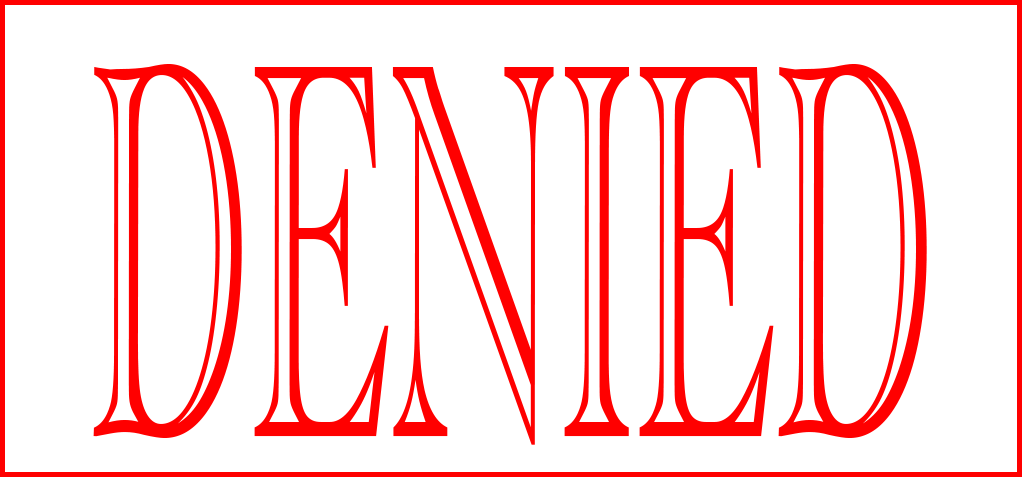
<style>
.page{position:relative;width:1022px;height:477px;background:#ffffff}
.page>*{position:absolute;margin:0}
.t1{font:554.1px "AcademyEngravedLetPlain";color:#ff0000;scale:0.38 1}
</style>
<div class="page">
<p class="t1" style="left:93px;top:64px;width:834px;height:381px">DENIED</p>
</div>
